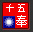
<style>
.page{position:relative;width:33px;height:32px;background:#f20000}
.page>*{position:absolute;margin:0}
.t1{font:10.4px "SimSun";color:#ffffff}
.t2{font:11.7px "SimSun";color:#ffffff}
</style>
<div class="page">
<p class="t1" style="left:6px;top:4px;width:19px;height:8px">十五</p>
<p class="t2" style="left:16px;top:15px;width:11px;height:12px">奉</p>
</div>
